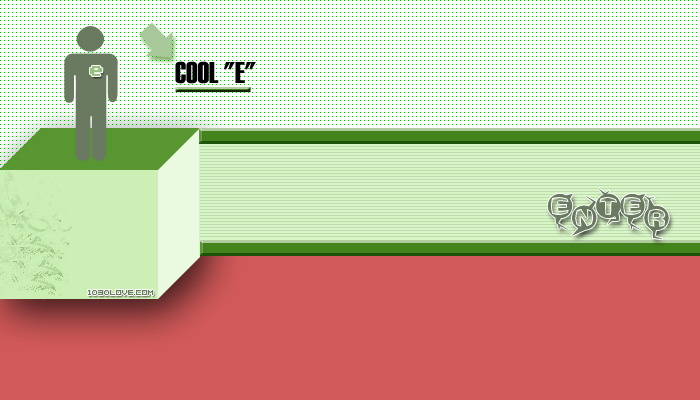
<style>
.page{position:relative;width:700px;height:400px;background:#d25959}
.page>*{position:absolute;margin:0}
.t1{font:30px "Haettenschweiler";color:#000000}
.t2{font:12px "04b11";color:#99c081}
.t3{font:30px "Machine-gun";color:#697a60}
.t4{font:6px "04b08";color:#697a60}
</style>
<div class="page">
<p class="t1" style="left:175px;top:61px;width:81px;height:23px">COOL "E"</p>
<p class="t2" style="left:90px;top:66px;width:13px;height:10px">e</p>
<p class="t3" style="left:547px;top:189px;width:122px;height:51px">ENTER</p>
<p class="t4" style="left:88px;top:290px;width:66px;height:5px">1030LOVE.COM</p>
</div>
